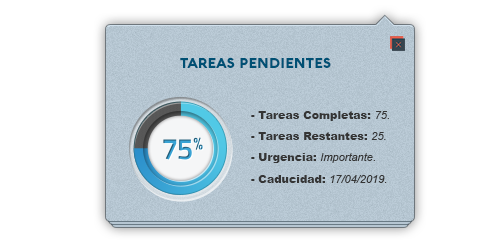
<style>
.page{position:relative;width:500px;height:250px;background:#ffffff}
.page>*{position:absolute;margin:0}
.t1{font:14px "Aquawax-Black";color:#005074}
.t2{font:11px "Arial-Black";color:#353535}
.t3{font:11px "Arial-ItalicMT";color:#353535}
</style>
<div class="page">
<p class="t1" style="left:180px;top:57px;width:151px;height:11px">TAREAS PENDIENTES</p>
<p class="t2" style="left:251px;top:111px;width:138px;height:72px">- Tareas Completas: <span class="t3">75.<br></span>- Tareas Restantes: <span class="t3">25.<br></span>- Urgencia: <span class="t3">Importante.<br></span>- Caducidad: <span class="t3">17/04/2019.</span></p>
</div>
